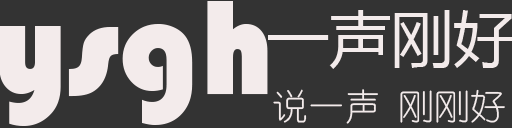
<style>
.page{position:relative;width:512px;height:128px;background:#333333}
.page>*{position:absolute;margin:0}
.t1{font:140px "Bauhaus93";color:#f3ebeb}
.t2{font:36px "YouYuan";color:#f3ebeb}
</style>
<div class="page">
<p class="t1" style="left:0px;top:1px;width:268px;height:125px">ysgh</p>
<p class="t2" style="left:273px;top:89px;width:232px;height:35px">说一声 刚刚好</p>
</div>
